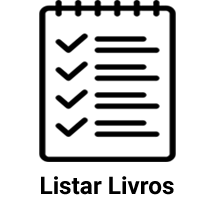
<style>
.page{position:relative;width:214px;height:199px;background:#ffffff}
.page>*{position:absolute;margin:0}
.t1{font:24.4px "Roboto-Bold";color:#000000}
</style>
<div class="page">
<p class="t1" style="left:41px;top:176px;width:133px;height:19px">Listar Livros</p>
</div>
